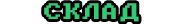
<style>
.page{position:relative;width:184px;height:24px;background:#ffffff}
.page>*{position:absolute;margin:0}
.t1{font:17.9px "PxPlus_IBM_BIOS";letter-spacing:0.075em;color:#39c773}
</style>
<div class="page">
<p class="t1" style="left:44px;top:3px;width:95px;height:19px">СКЛАД</p>
</div>
